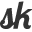
<style>
.page{position:relative;width:32px;height:32px;background:#ffffff}
.page>*{position:absolute;margin:0}
.t1{font:38.2px "LobsterTwo-Italic";letter-spacing:-0.025em;color:#333333;font-weight:bold}
</style>
<div class="page">
<p class="t1" style="left:0px;top:1px;width:33px;height:28px">sk</p>
</div>
